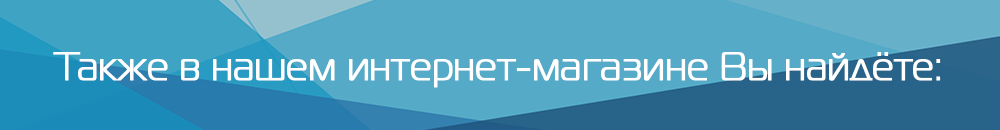
<style>
.page{position:relative;width:1000px;height:130px;background:#54aac7}
.page>*{position:absolute;margin:0}
.t1{font:40px "MagistralC";color:#ffffff;font-weight:bold}
</style>
<div class="page">
<p class="t1" style="left:53px;top:52px;width:888px;height:36px">Также в нашем интернет-магазине Вы найдёте:</p>
</div>
